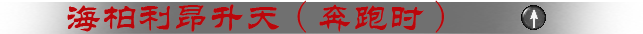
<style>
.page{position:relative;width:643px;height:34px;background:#707070}
.page>*{position:absolute;margin:0}
.t1{font:36px "STLiti";color:#ba060b}
.t2{font:36px "FangSong";color:#ba060b}
</style>
<div class="page">
<p class="t1" style="left:67px;top:0px;width:378px;height:33px">海柏利昂升天<span class="t2">(</span>奔跑时<span class="t2">)</span></p>
</div>
